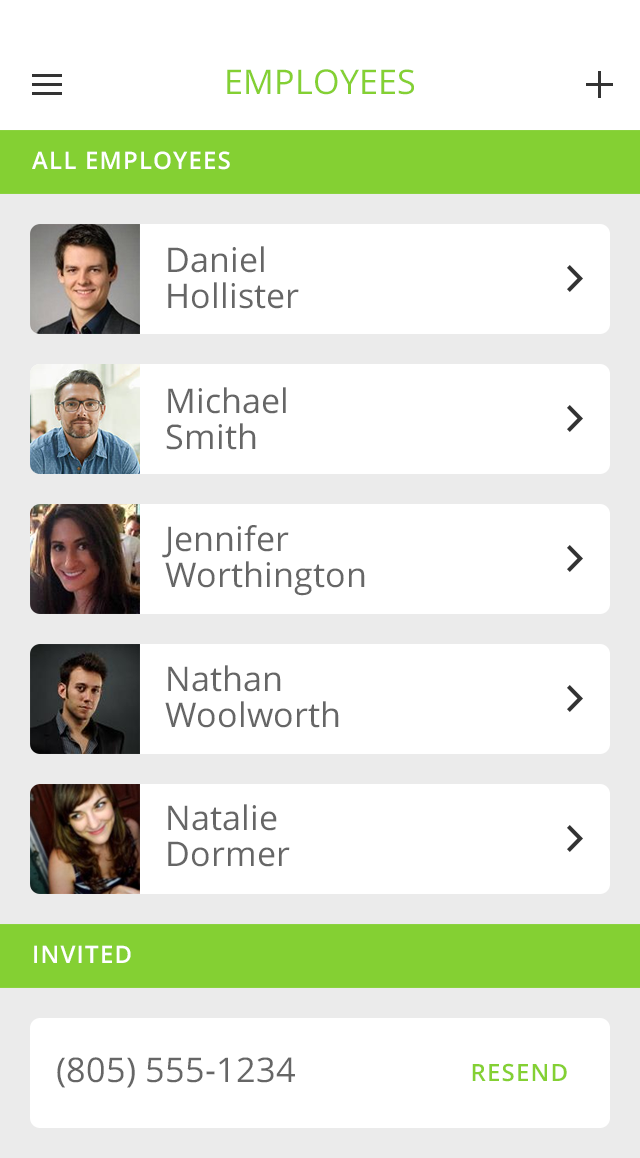
<style>
.page{position:relative;width:640px;height:1158px;background:#ffffff}
.page>*{position:absolute;margin:0}
.t1{font:34px "OpenSans";letter-spacing:0.01em;color:#84d033}
.t2{font:24px "OpenSans-Semibold";letter-spacing:0.05em;color:#ffffff;text-transform:uppercase}
.t3{font:34px/36px "OpenSans";color:#666666}
.t4{font:34px "OpenSans";color:#666666}
.t5{font:23.9px "OpenSans-Semibold";letter-spacing:0.05em;color:#84d033;text-transform:uppercase}
</style>
<div class="page">
<p class="t1" style="left:227px;top:69px;width:187px;height:26px">EMPLOYEES</p>
<p class="t2" style="left:32px;top:151px;width:198px;height:19px">ALL EMPLOYEES</p>
<p class="t3" style="left:168px;top:246px;width:131px;height:63px">Daniel<br>Hollister</p>
<p class="t3" style="left:166px;top:387px;width:120px;height:63px">Michael<br>Smith</p>
<p class="t3" style="left:162px;top:525px;width:203px;height:71px">Jennifer<br>Worthington</p>
<p class="t3" style="left:165px;top:665px;width:174px;height:63px">Nathan<br>Woolworth</p>
<p class="t3" style="left:168px;top:804px;width:122px;height:63px">Natalie<br>Dormer</p>
<p class="t2" style="left:34px;top:945px;width:97px;height:18px">INVITED</p>
<p class="t4" style="left:57px;top:1057px;width:238px;height:31px">(805) 555-1234</p>
<p class="t5" style="left:472px;top:1063px;width:95px;height:19px">RESEND</p>
</div>
